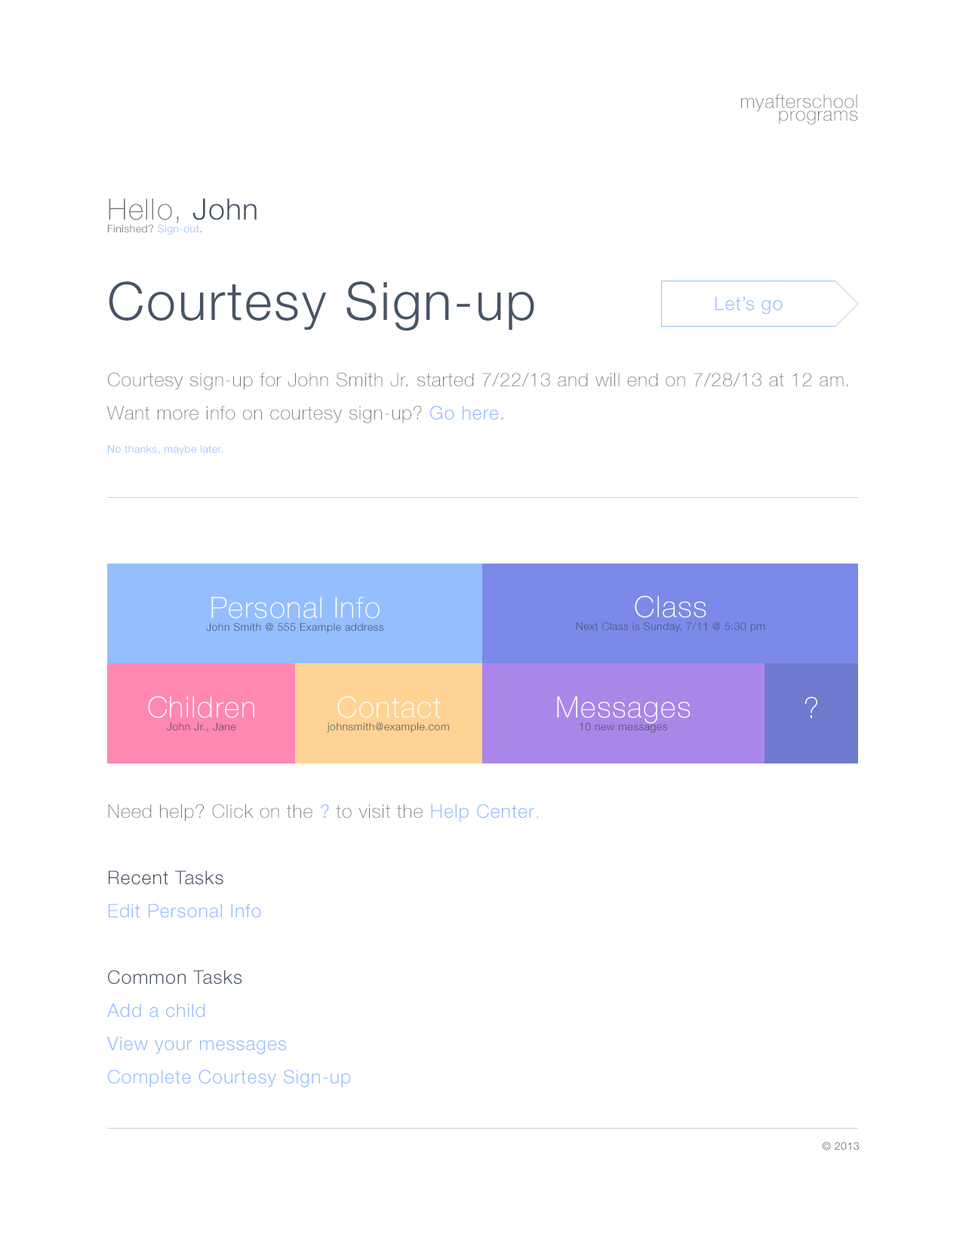
<style>
.page{position:relative;width:966px;height:1235px;background:#ffffff}
.page>*{position:absolute;margin:0}
.t1{font:18.9px/12.8px "HelveticaNeueLTStd-Th";letter-spacing:0.039em;color:#71767f}
.t2{font:10.6px/12.8px "HelveticaNeueLTStd-Lt";letter-spacing:0.039em;color:#71767f}
.t3{font:29.4px/12.8px "HelveticaNeueLTStd-Th";letter-spacing:0.039em;color:#71767f}
.t4{font:29.4px/12.8px "HelveticaNeueLTStd-Lt";letter-spacing:0.039em;color:#475466}
.t5{font:10.6px/12.8px "HelveticaNeueLTStd-Lt";letter-spacing:0.039em;color:#95beff}
.t6{font:18.9px/33.2px "HelveticaNeueLTStd-Th";letter-spacing:0.039em;color:#71767f}
.t7{font:52.8px/33.2px "HelveticaNeueLTStd-Lt";letter-spacing:0.039em;color:#475466}
.t8{font:18.9px/33.2px "HelveticaNeueLTStd-Lt";letter-spacing:0.039em;color:#95beff}
.t9{font:10.6px/33.2px "HelveticaNeueLTStd-Lt";letter-spacing:0.039em;color:#95beff}
.t10{font:18.9px "HelveticaNeueLTStd-Lt";letter-spacing:0.039em;color:#95beff}
.t11{font:10.6px/12.8px "HelveticaNeueLTStd-Lt";letter-spacing:0.039em;color:#475467}
.t12{font:29.4px/33.2px "HelveticaNeueLTStd-Th";letter-spacing:0.039em;color:#ffffff}
.t13{font:29.4px/12.8px "HelveticaNeueLTStd-Th";letter-spacing:0.039em;color:#ffffff}
.t14{font:29.4px "HelveticaNeueLTStd-Th";letter-spacing:0.039em;color:#ffffff}
.t15{font:18.9px/33.2px "HelveticaNeueLTStd-Th";letter-spacing:0.039em;color:#95beff}
.t16{font:18.9px/33.2px "HelveticaNeueLTStd-Lt";letter-spacing:0.039em;color:#475467}
.t17{font:10.6px "HelveticaNeueLTStd-Lt";letter-spacing:0.039em;color:#475467}
</style>
<div class="page">
<p class="t1" style="left:741px;top:94px;width:117px;height:30px;text-align:right">myafterschool<br>programs</p>
<p class="t2" style="left:108px;top:198px;width:148px;height:37px"><span class="t3">Hello, </span><span class="t4">John<br></span>Finished? <span class="t5">Sign-out</span>.</p>
<p class="t6" style="left:106px;top:281px;width:742px;height:174px"><span class="t7">Courtesy Sign-up<br><br></span>Courtesy sign-up for John Smith Jr. started 7/22/13 and will end on 7/28/13 at 12 am. Want more info on courtesy sign-up? <span class="t8">Go here</span>.<br><span class="t9">No thanks, maybe later.</span></p>
<p class="t10" style="left:715px;top:296px;width:67px;height:19px">Let’s go</p>
<p class="t11" style="left:206px;top:597px;width:177px;height:36px;text-align:center"><span class="t12">Personal Info<br></span>John Smith @ 555 Example address</p>
<p class="t11" style="left:576px;top:595px;width:189px;height:37px;text-align:center"><span class="t13">Class<br></span>Next Class is Sunday, 7/11 @ 5:30 pm</p>
<p class="t11" style="left:148px;top:696px;width:106px;height:36px;text-align:center"><span class="t13">Children<br></span>John Jr., Jane</p>
<p class="t11" style="left:327px;top:696px;width:122px;height:36px;text-align:center"><span class="t13">Contact<br></span>johnsmith@example.com</p>
<p class="t11" style="left:557px;top:696px;width:133px;height:36px;text-align:center"><span class="t13">Messages<br></span>10 new messages</p>
<p class="t14" style="left:804px;top:696px;width:13px;height:22px">?</p>
<p class="t8" style="left:106px;top:804px;width:432px;height:284px"><span class="t6">Need help? Click on the </span>? <span class="t6">to visit the </span>Help Center<span class="t15">.<br><br></span><span class="t16">Recent Tasks<br></span>Edit Personal Info<br><br><span class="t16">Common Tasks<br></span>Add a child<br>View your messages<br>Complete Courtesy Sign-up</p>
<p class="t17" style="left:822px;top:1141px;width:36px;height:9px">© 2013</p>
</div>
